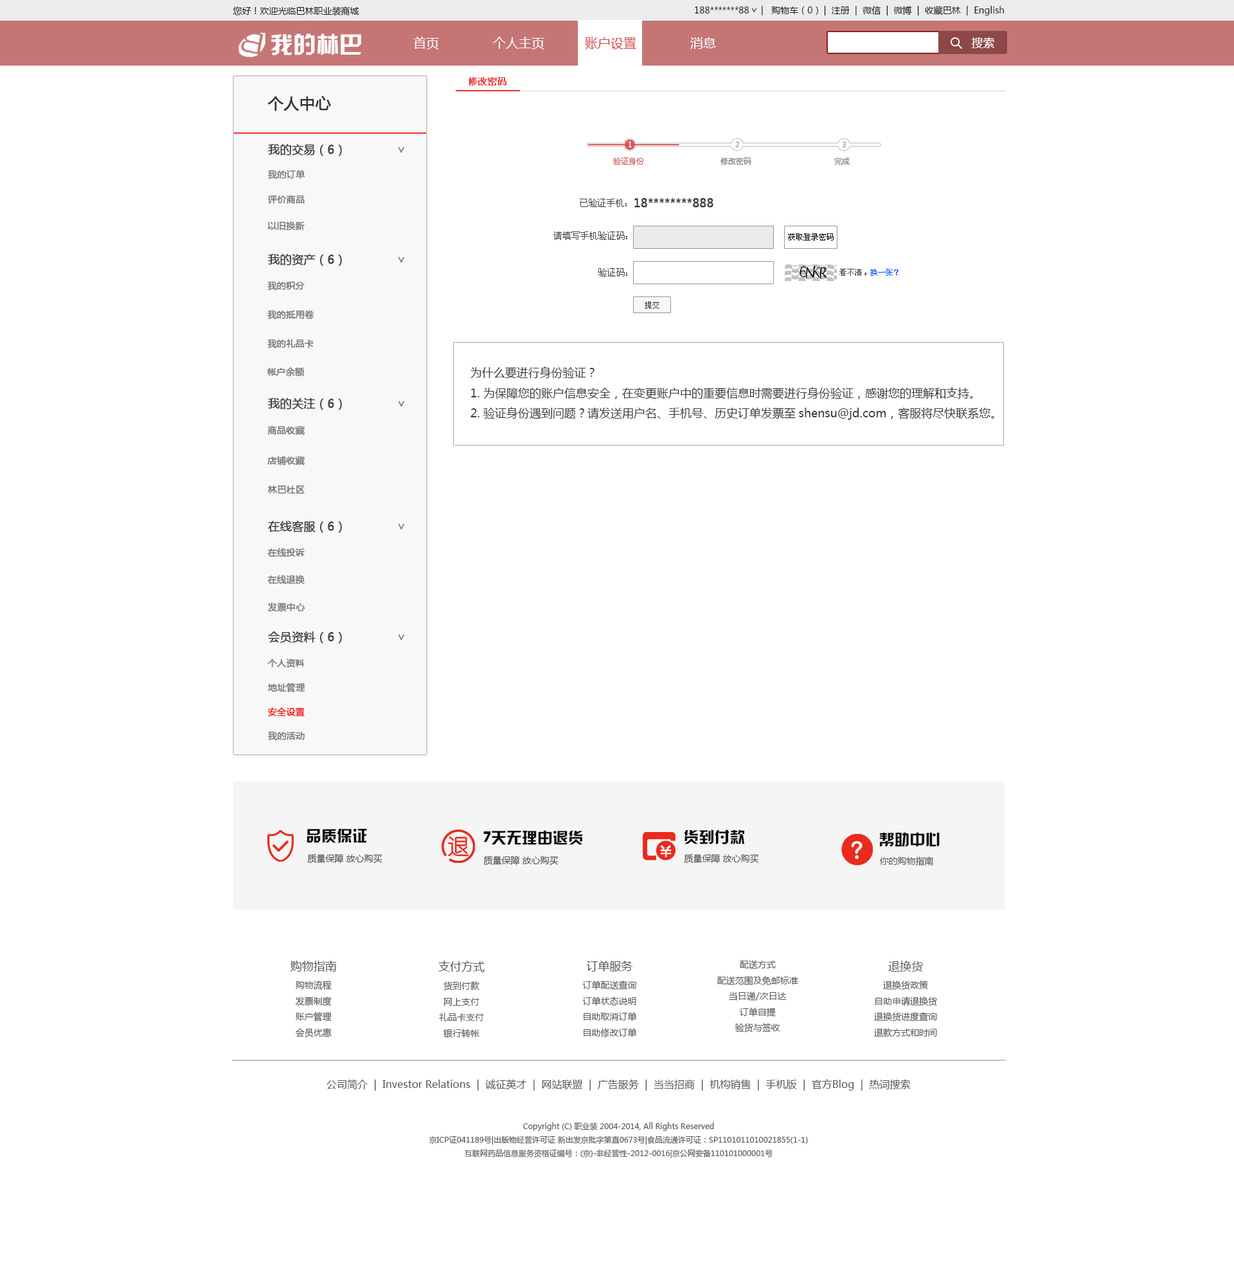
<style>
.page{position:relative;width:1234px;height:1286px;background:#ffffff}
.page>*{position:absolute;margin:0}
.t1{font:9px "MicrosoftYaHei";color:#1e1e1e}
.t2{font:9.2px "MicrosoftYaHei";scale:0.94 1}
.t3{font:23.1px "HYk2gj";color:#ffffff}
.t4{font:12.9px "MicrosoftYaHei";color:#ffffff}
.t5{font:12.9px "MicrosoftYaHei";color:#d54747}
.t6{font:11.6px "MicrosoftYaHei";color:#ffffff}
.t7{font:9px "SimSun";color:#ec4040;font-weight:bold}
.t8{font:15.4px "MicrosoftYaHei";color:#323232;font-weight:bold}
.t9{font:11.6px "MicrosoftYaHei";color:#434343;font-weight:bold}
.t10{font:11.6px "MicrosoftYaHei";color:#787878;font-weight:bold}
.t11{font:7.7px "MicrosoftYaHei";color:#fffefe}
.t12{font:7.7px "MicrosoftYaHei";color:#999999}
.t13{font:7.7px "MicrosoftYaHei";color:#c94d4d}
.t14{font:7.7px "MicrosoftYaHei";color:#757478}
.t15{font:9px "MicrosoftYaHei";color:#7c7c7c;font-weight:bold}
.t16{font:9px "MicrosoftYaHei";color:#787878;font-weight:bold}
.t17{font:9px "SimSun";color:#3c3c3c}
.t18{font:11.6px "MicrosoftYaHei";color:#3c3c3c;font-weight:bold}
.t19{font:7.7px "SimSun";color:#000000}
.t20{font:7.7px "SimSun";color:#3c3c3c}
.t21{font:7.7px "SimSun";color:#0b5bff}
.t22{font:11.6px "MicrosoftYaHei";color:#3c3c3c}
.t23{font:9px "MicrosoftYaHei";color:#757575;font-weight:bold}
.t24{font:9px "MicrosoftYaHei";color:#ef1818;font-weight:bold}
.t25{font:15.4px "HYk2gj";color:#080808}
.t26{font:15.4px "HYk2gj";color:#0d0d0d}
.t27{font:15.4px "HYk2gj";color:#090909}
.t28{font:15.4px "HYk2gj";color:#0b0b0b}
.t29{font:9px "MicrosoftYaHei";color:#4c4c4c}
.t30{font:9px "MicrosoftYaHei";color:#4e4e4e}
.t31{font:9px "MicrosoftYaHei";color:#505050}
.t32{font:9px "MicrosoftYaHei";color:#575757}
.t33{font:11.6px "MicrosoftYaHei";color:#575757}
.t34{font:10.3px "MicrosoftYaHei";color:#575757}
.t35{font:7.7px "MicrosoftYaHei";color:#575757}
</style>
<div class="page">
<p class="t1" style="left:695px;top:6px;width:309px;height:9px">188*******88                            |  注册  |  微信  |  微博  |  收藏巴林  |  English</p>
<p class="t1" style="left:762px;top:6px;width:56px;height:9px">|   购物车（0）</p>
<p class="t1" style="left:233px;top:6px;width:126px;height:10px">您好！欢迎光临巴林职业装商城</p>
<p class="t2" style="left:752px;top:8px;width:5px;height:5px;rotate:90deg">&gt;</p>
<p class="t3" style="left:271px;top:33px;width:90px;height:22px">我的林巴</p>
<p class="t4" style="left:413px;top:37px;width:26px;height:13px">首页</p>
<p class="t4" style="left:493px;top:37px;width:51px;height:13px">个人主页</p>
<p class="t5" style="left:585px;top:37px;width:51px;height:13px">账户设置</p>
<p class="t4" style="left:690px;top:37px;width:26px;height:12px">消息</p>
<p class="t6" style="left:971px;top:37px;width:24px;height:12px">搜索</p>
<p class="t7" style="left:469px;top:77px;width:38px;height:9px">修改密码</p>
<p class="t8" style="left:267px;top:96px;width:64px;height:15px">个人中心</p>
<p class="t9" style="left:268px;top:144px;width:74px;height:12px">我的交易（6）</p>
<p class="t10" style="left:398px;top:147px;width:7px;height:6px;rotate:90deg">&gt;</p>
<p class="t11" style="left:628px;top:141px;width:5px;height:6px">1</p>
<p class="t12" style="left:735px;top:141px;width:5px;height:6px">2</p>
<p class="t12" style="left:842px;top:141px;width:4px;height:6px">3</p>
<p class="t13" style="left:613px;top:157px;width:31px;height:8px">验证身份</p>
<p class="t14" style="left:721px;top:157px;width:31px;height:8px">修改密码</p>
<p class="t14" style="left:834px;top:158px;width:16px;height:7px">完成</p>
<p class="t15" style="left:268px;top:170px;width:37px;height:9px">我的订单</p>
<p class="t16" style="left:267px;top:195px;width:38px;height:9px">评价商品</p>
<p class="t17" style="left:580px;top:199px;width:47px;height:8px">已验证手机：</p>
<p class="t18" style="left:634px;top:198px;width:80px;height:10px">18********888</p>
<p class="t16" style="left:267px;top:221px;width:38px;height:10px">以旧换新</p>
<p class="t17" style="left:554px;top:231px;width:73px;height:9px">请填写手机验证码：</p>
<p class="t19" style="left:788px;top:233px;width:46px;height:7px">获取登录密码</p>
<p class="t9" style="left:268px;top:254px;width:74px;height:12px">我的资产（6）</p>
<p class="t10" style="left:398px;top:256px;width:7px;height:7px;rotate:90deg">&gt;</p>
<p class="t17" style="left:598px;top:268px;width:29px;height:8px">验证码：</p>
<p class="t20" style="left:840px;top:269px;width:59px;height:7px">看不清，<span class="t21">换一张？</span></p>
<p class="t16" style="left:267px;top:281px;width:38px;height:10px">我的积分</p>
<p class="t20" style="left:645px;top:302px;width:15px;height:7px">提交</p>
<p class="t16" style="left:267px;top:310px;width:47px;height:10px">我的抵用卷</p>
<p class="t16" style="left:267px;top:339px;width:47px;height:9px">我的礼品卡</p>
<p class="t16" style="left:267px;top:367px;width:37px;height:10px">帐户余额</p>
<p class="t22" style="left:471px;top:366px;width:524px;height:54px">为什么要进行身份验证？<br>1. 为保障您的账户信息安全，在变更账户中的重要信息时需要进行身份验证，感谢您的理解和支持。<br>2. 验证身份遇到问题？请发送用户名、手机号、历史订单发票至shensu@jd.com，客服将尽快联系您。</p>
<p class="t9" style="left:268px;top:398px;width:74px;height:12px">我的关注（6）</p>
<p class="t10" style="left:398px;top:401px;width:7px;height:6px;rotate:90deg">&gt;</p>
<p class="t16" style="left:267px;top:426px;width:38px;height:9px">商品收藏</p>
<p class="t16" style="left:267px;top:456px;width:38px;height:9px">店铺收藏</p>
<p class="t16" style="left:267px;top:485px;width:38px;height:9px">林巴社区</p>
<p class="t9" style="left:268px;top:520px;width:74px;height:13px">在线客服（6）</p>
<p class="t10" style="left:398px;top:523px;width:7px;height:7px;rotate:90deg">&gt;</p>
<p class="t16" style="left:267px;top:548px;width:38px;height:9px">在线投诉</p>
<p class="t16" style="left:267px;top:575px;width:38px;height:9px">在线退换</p>
<p class="t16" style="left:268px;top:602px;width:37px;height:10px">发票中心</p>
<p class="t9" style="left:268px;top:631px;width:74px;height:13px">会员资料（6）</p>
<p class="t10" style="left:398px;top:634px;width:7px;height:6px;rotate:90deg">&gt;</p>
<p class="t23" style="left:267px;top:658px;width:38px;height:9px">个人资料</p>
<p class="t16" style="left:267px;top:683px;width:38px;height:9px">地址管理</p>
<p class="t24" style="left:267px;top:707px;width:38px;height:10px">安全设置</p>
<p class="t16" style="left:268px;top:731px;width:37px;height:10px">我的活动</p>
<p class="t25" style="left:307px;top:829px;width:60px;height:14px">品质保证</p>
<p class="t26" style="left:483px;top:830px;width:100px;height:15px">7天无理由退货</p>
<p class="t27" style="left:684px;top:829px;width:60px;height:16px">货到付款</p>
<p class="t28" style="left:879px;top:832px;width:61px;height:15px">帮助中心</p>
<p class="t29" style="left:307px;top:854px;width:75px;height:9px">质量保障 放心购买</p>
<p class="t30" style="left:483px;top:856px;width:76px;height:9px">质量保障 放心购买</p>
<p class="t31" style="left:684px;top:854px;width:75px;height:9px">质量保障 放心购买</p>
<p class="t32" style="left:879px;top:856px;width:55px;height:10px">你的购物指南</p>
<p class="t32" style="left:290px;top:960px;width:47px;height:78px;text-align:center"><span class="t33">购物指南<br></span>购物流程<br>发票制度<br>账户管理<br>会员优惠</p>
<p class="t32" style="left:438px;top:960px;width:47px;height:78px;text-align:center"><span class="t33">支付方式<br></span>货到付款<br>网上支付<br>礼品卡支付<br>银行转帐</p>
<p class="t32" style="left:582px;top:960px;width:55px;height:78px;text-align:center"><span class="t33">订单服务<br></span>订单配送查询<br>订单状态说明<br>自助取消订单<br>自助修改订单</p>
<p class="t32" style="left:717px;top:960px;width:81px;height:72px;text-align:center">配送方式<br>配送范围及免邮标准<br>当日递/次日达<br>订单自提<br>验货与签收</p>
<p class="t32" style="left:874px;top:960px;width:63px;height:77px;text-align:center"><span class="t33">退换货<br></span>退换货政策<br>自助申请退换货<br>退换货进度查询<br>退款方式和时间</p>
<p class="t34" style="left:327px;top:1079px;width:583px;height:11px">公司简介  |  Investor Relations  |  诚征英才  |  网站联盟  |  广告服务  |  当当招商  |  机构销售  |  手机版  |  官方Blog  |  热词搜索</p>
<p class="t35" style="left:429px;top:1122px;width:379px;height:36px;text-align:center">Copyright (C) 职业装 2004-2014, All Rights Reserved<br>京ICP证041189号|出版物经营许可证 新出发京批字第直0673号|食品流通许可证：SP1101011010021855(1-1)<br>互联网药品信息服务资格证编号：(京)-非经营性-2012-0016|京公网安备110101000001号</p>
</div>
